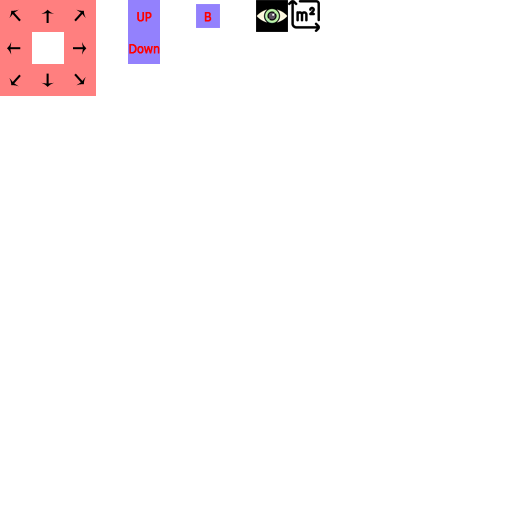
<style>
.page{position:relative;width:512px;height:512px;background:#ffffff}
.page>*{position:absolute;margin:0}
.t1{font:12px "Tahoma";color:#ff0000;font-weight:bold}
</style>
<div class="page">
<p class="t1" style="left:137px;top:12px;width:15px;height:10px">UP</p>
<p class="t1" style="left:204px;top:12px;width:8px;height:10px">B</p>
<p class="t1" style="left:129px;top:44px;width:31px;height:10px">Down</p>
</div>
